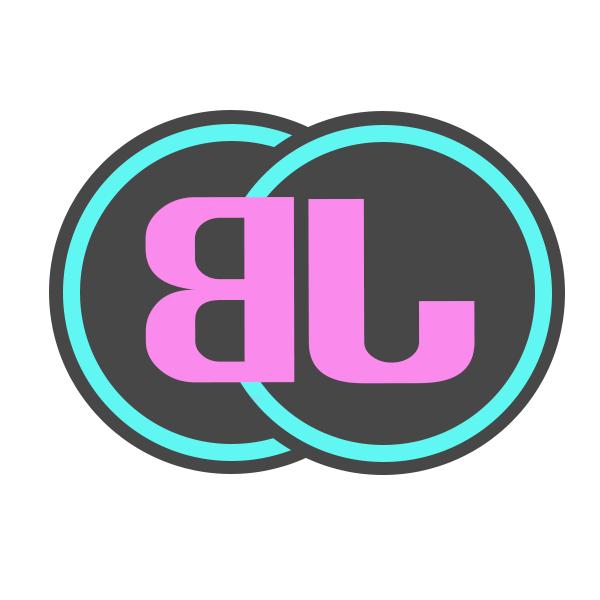
<style>
.page{position:relative;width:600px;height:600px;background:#ffffff}
.page>*{position:absolute;margin:0}
.t1{font:246.8px "Silom";color:#fa8aec;scale:1.2 1}
.t2{font:245.7px "Silom";color:#fa8aec;scale:1.35 1}
</style>
<div class="page">
<p class="t1" style="left:145px;top:197px;width:150px;height:186px;rotate:180deg">B</p>
<p class="t2" style="left:308px;top:198px;width:167px;height:186px;rotate:180deg">J</p>
</div>
